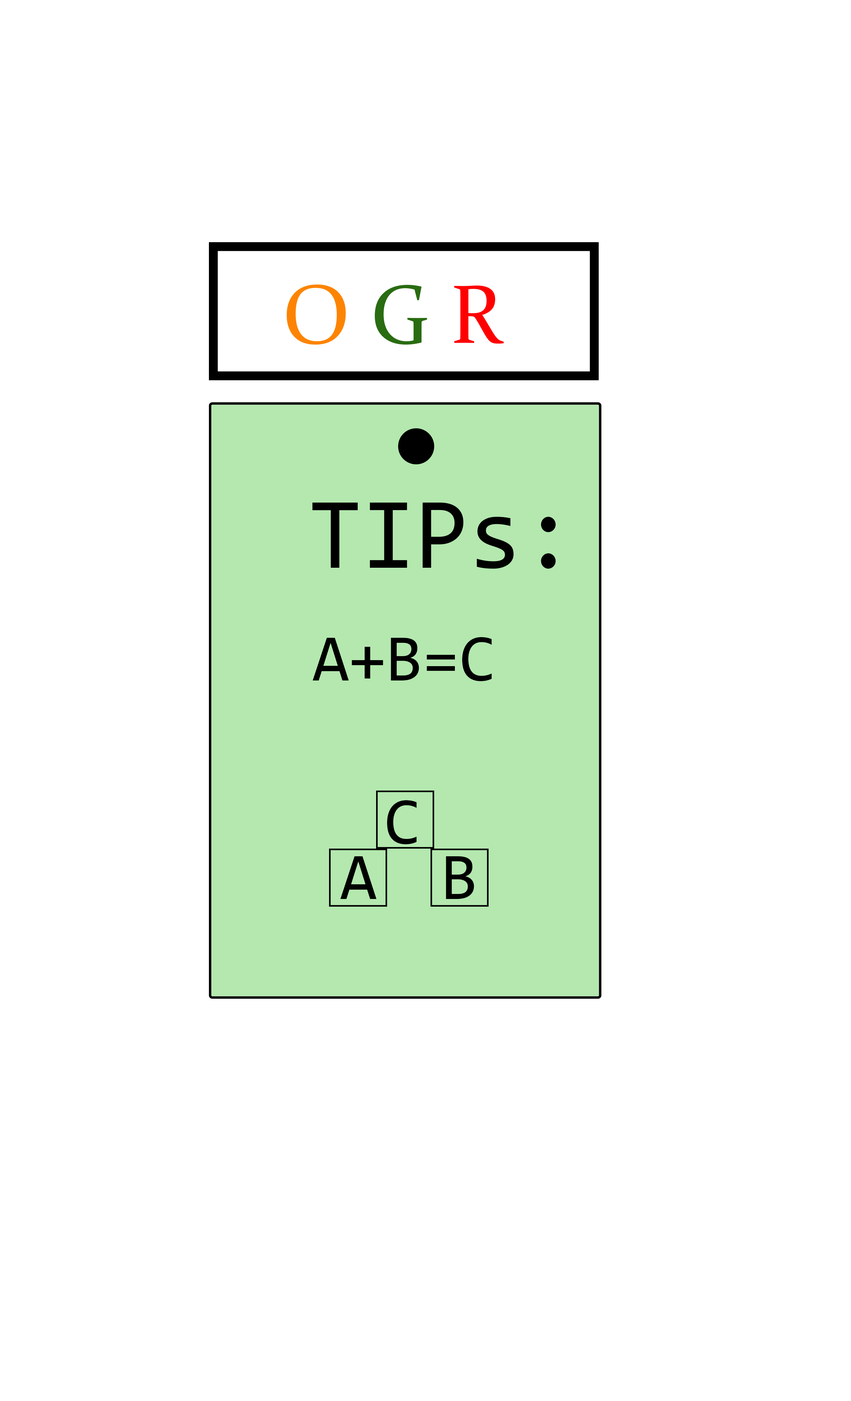
<style>
.page{position:relative;width:851px;height:1401px;background:#ffffff}
.page>*{position:absolute;margin:0}
.t1{font:83.4px "Constantia";color:#fd8402}
.t2{font:83.4px "Constantia";color:#296c11}
.t3{font:83.4px "Constantia";color:#ff0000}
.t4{font:66.7px "Consolas";color:#000000}
</style>
<div class="page">
<p class="t1" style="left:287px;top:285px;width:217px;height:60px">O <span class="t2">G </span><span class="t3">R</span></p>
<p class="t4" style="left:312px;top:637px;width:180px;height:44px">A+B=C</p>
<p class="t4" style="left:387px;top:800px;width:30px;height:45px">C</p>
<p class="t4" style="left:340px;top:857px;width:36px;height:42px">A</p>
<p class="t4" style="left:446px;top:857px;width:28px;height:42px">B</p>
</div>
